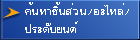
<style>
.page{position:relative;width:140px;height:40px}
.page>*{position:absolute;margin:0}
.t1{font:15.3px/18px "EucrosiaDSE";color:#ffffff;scale:1.12 1}
</style>
<div class="page">
<p class="t1" style="left:25px;top:2px;width:104px;height:31px">¤é¹ËÒªÔé¹ÊèÇ¹/ÍÐäËÅè/<br>»ÃÐ´ÑºÂ¹µì</p>
</div>
